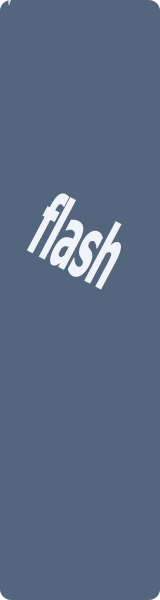
<style>
.page{position:relative;width:160px;height:600px;background:#53667e}
.page>*{position:absolute;margin:0}
.t1{font:6px "Tahoma-Bold";color:#f0f3f8}
.t2{font:88.2px "Tahoma-Bold";color:#f0f3f8;scale:0.41 1}
</style>
<div class="page">
<p class="t1" style="left:8px;top:0px;width:3px;height:5px">f</p>
<p class="t2" style="left:27px;top:193px;width:95px;height:97px;rotate:28deg">flash</p>
</div>
